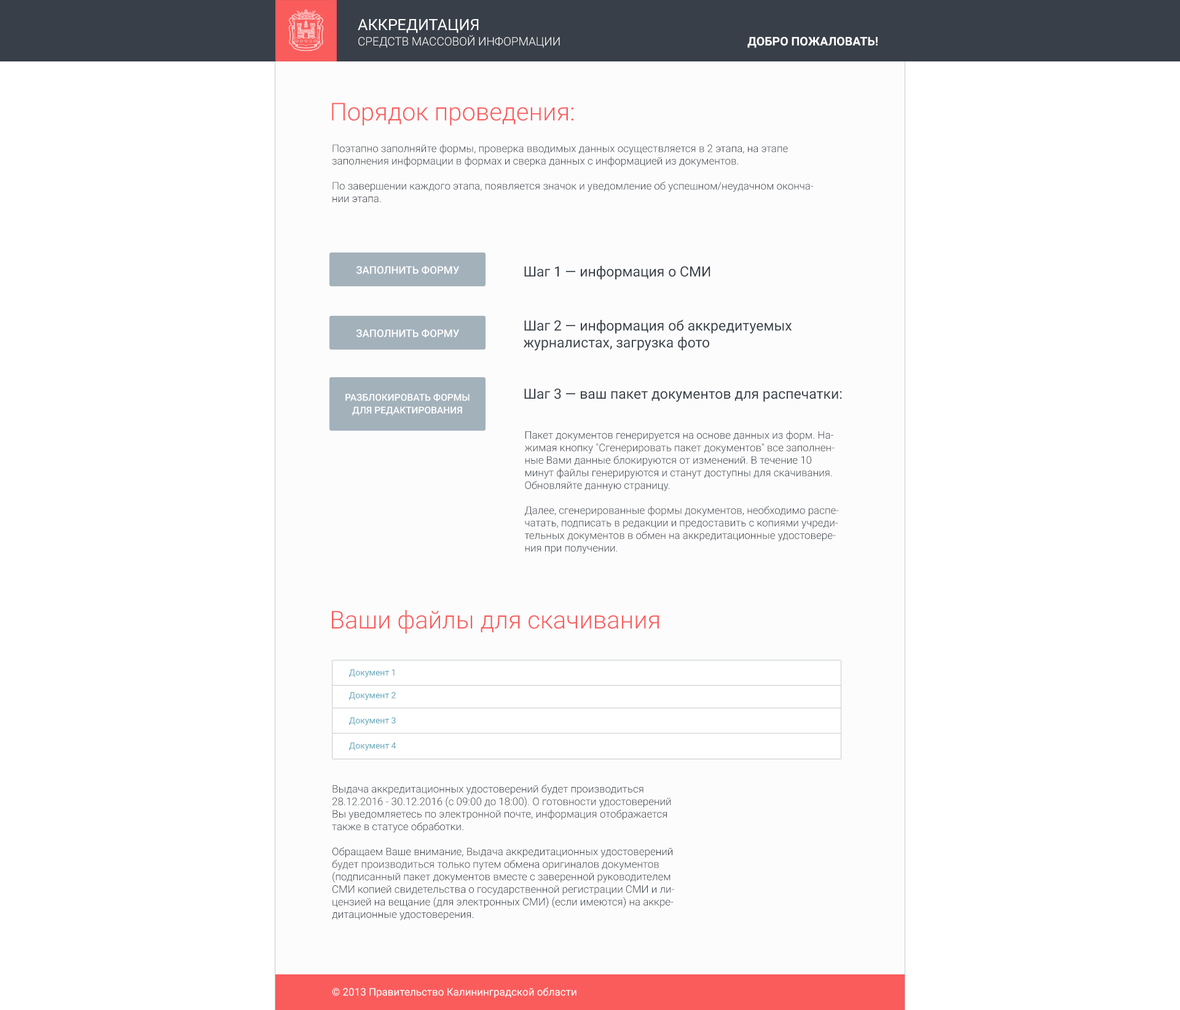
<style>
.page{position:relative;width:1180px;height:1010px;background:#ffffff}
.page>*{position:absolute;margin:0}
.t1{font:11.6px/15.4px "Roboto-Light";color:#fcfcfc;text-transform:uppercase}
.t2{font:15.5px/15.4px "Roboto-Regular";color:#fcfcfc;text-transform:uppercase}
.t3{font:12px "Roboto-Bold";color:#ffffff;text-transform:uppercase}
.t4{font:24.6px "Roboto-Light";color:#fa5c5c}
.t5{font:10.4px "Roboto-Light";color:#383f48}
.t6{font:10.4px "Roboto-Medium";color:#ffffff;text-transform:uppercase}
.t7{font:14.1px "Roboto-Regular";color:#383f48}
.t8{font:9.5px/12.8px "Roboto-Medium";color:#ffffff;text-transform:uppercase}
.t9{font:8.6px "Roboto-Regular";color:#5fa6ba}
.t10{font:10.4px "Roboto-Regular";color:#ffffff}
</style>
<div class="page">
<p class="t1" style="left:358px;top:19px;width:202px;height:29px"><span class="t2">Аккредитация <br></span>средств массовой информации</p>
<p class="t3" style="left:747px;top:37px;width:131px;height:11px">добро пожаловать!</p>
<p class="t4" style="left:332px;top:103px;width:241px;height:23px">Порядок проведения:</p>
<p class="t5" style="left:332px;top:144px;width:482px;height:59px">Поэтапно заполняйте формы, проверка вводимых данных осуществляется в 2 этапа, на этапе <br>заполнения информации в формах и сверка данных с информацией из документов.<br><br>По завершении каждого этапа, появляется значок и уведомление об успешном/неудачном окончании этапа.</p>
<p class="t6" style="left:356px;top:266px;width:103px;height:8px">заполнить форму</p>
<p class="t7" style="left:524px;top:266px;width:187px;height:14px">Шаг 1 — информация о СМИ</p>
<p class="t6" style="left:356px;top:329px;width:103px;height:8px">заполнить форму</p>
<p class="t7" style="left:523px;top:320px;width:269px;height:31px">Шаг 2 — информация об аккредитуемых <br>журналистах, загрузка фото</p>
<p class="t7" style="left:524px;top:388px;width:318px;height:14px">Шаг 3 — ваш пакет документов для распечатки:</p>
<p class="t8" style="left:345px;top:393px;width:125px;height:22px;text-align:center">разблокировать формы<br>для редактирования</p>
<p class="t5" style="left:524px;top:431px;width:315px;height:123px">Пакет документов генерируется на основе данных из форм. Нажимая кнопку "Сгенерировать пакет документов" все заполненные Вами данные блокируются от изменений. В течение 10 минут файлы генерируются и станут доступны для скачивания. Обновляйте данную страницу.<br><br>Далее, сгенерированные формы документов, необходимо распечатать, подписать в редакции и предоставить с копиями учредительных документов в обмен на аккредитационные удостоверения при получении.</p>
<p class="t4" style="left:332px;top:610px;width:327px;height:24px">Ваши файлы для скачивания</p>
<p class="t9" style="left:349px;top:669px;width:46px;height:9px">Документ 1</p>
<p class="t9" style="left:349px;top:692px;width:47px;height:9px">Документ 2</p>
<p class="t9" style="left:349px;top:717px;width:47px;height:9px">Документ 3</p>
<p class="t9" style="left:349px;top:742px;width:47px;height:9px">Документ 4</p>
<p class="t5" style="left:332px;top:785px;width:342px;height:136px">Выдача аккредитационных удостоверений будет производиться 28.12.2016 - 30.12.2016 (с 09:00 до 18:00). О готовности удостоверений Вы уведомляетесь по электронной почте, информация отображается также в статусе обработки. <br><br>Обращаем Ваше внимание, Выдача аккредитационных удостоверений будет производиться только путем обмена оригиналов документов (подписанный пакет документов вместе с заверенной руководителем СМИ копией свидетельства о государственной регистрации СМИ и лицензией на вещание (для электронных СМИ) (если имеются) на аккредитационные удостоверения.</p>
<p class="t10" style="left:332px;top:988px;width:245px;height:10px">© 2013 Правительство Калининградской области</p>
</div>
